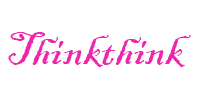
<style>
.page{position:relative;width:200px;height:100px;background:#ffffff}
.page>*{position:absolute;margin:0}
.t1{font:48px "BlackadderITC-Regular";color:#ee27aa}
</style>
<div class="page">
<p class="t1" style="left:8px;top:32px;width:183px;height:35px">Thinkthink</p>
</div>
